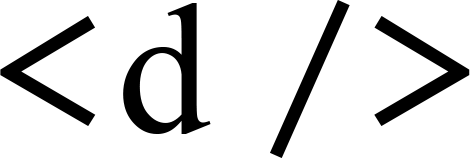
<style>
.page{position:relative;width:470px;height:158px;background:#ffffff}
.page>*{position:absolute;margin:0}
.t1{font:186px "PTMono-Regular";color:#000000}
.t2{font:186px "TimesNewRomanPSMT";color:#000000}
</style>
<div class="page">
<p class="t1" style="left:0px;top:0px;width:470px;height:158px">&lt;<span class="t2">d </span>/&gt;</p>
</div>
